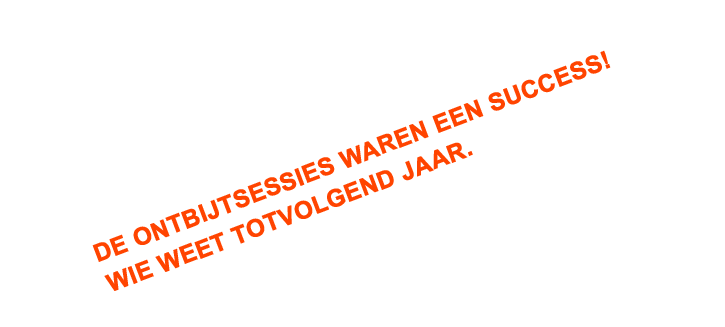
<style>
.page{position:relative;width:725px;height:327px;background:#ffffff}
.page>*{position:absolute;margin:0}
.t1{font:24px "Arial-BoldMT";color:#ff4400;text-transform:uppercase;font-weight:bold}
</style>
<div class="page">
<p class="t1" style="left:92px;top:50px;width:519px;height:212px;rotate:-21deg">De Ontbijtsessies waren een Success!</p>
<p class="t1" style="left:104px;top:142px;width:369px;height:149px;rotate:-21deg">wie weet totvolgend jaar.</p>
</div>
